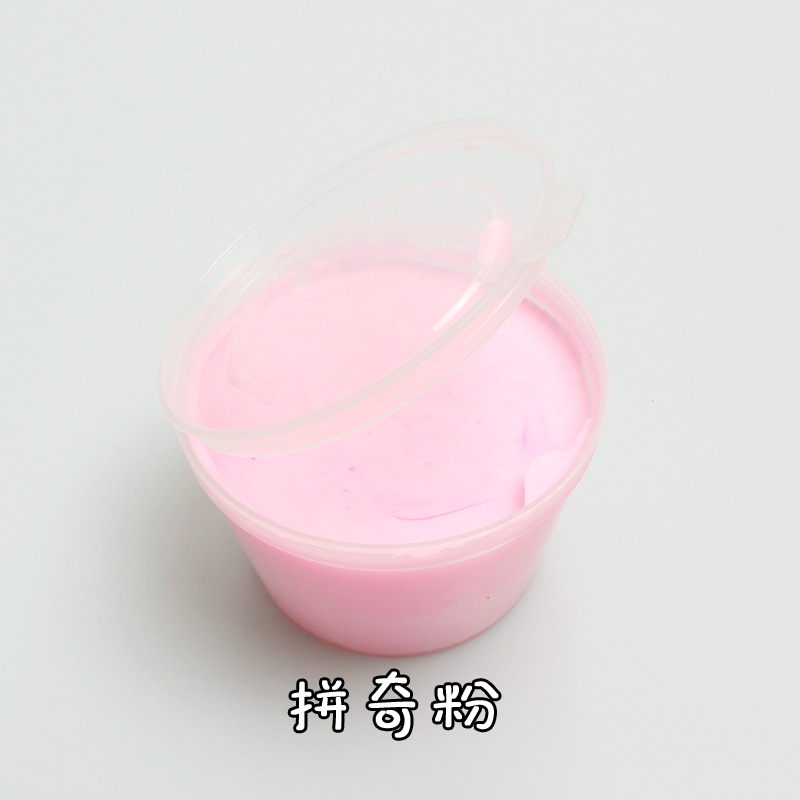
<style>
.page{position:relative;width:800px;height:800px}
.page>*{position:absolute;margin:0}
.t1{font:72px "DFPao-W4-WINP-BF";color:#ffffff;font-weight:bold}
</style>
<div class="page">
<p class="t1" style="left:290px;top:671px;width:209px;height:67px">拼奇粉</p>
</div>
